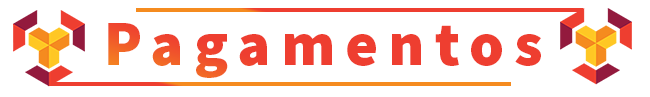
<style>
.page{position:relative;width:650px;height:97px;background:#ffffff}
.page>*{position:absolute;margin:0}
.t1{font:62.8px "SourceSansPro-Black";letter-spacing:0.16em;color:#ee3e30}
</style>
<div class="page">
<p class="t1" style="left:108px;top:23px;width:433px;height:55px">Pagamentos</p>
</div>
